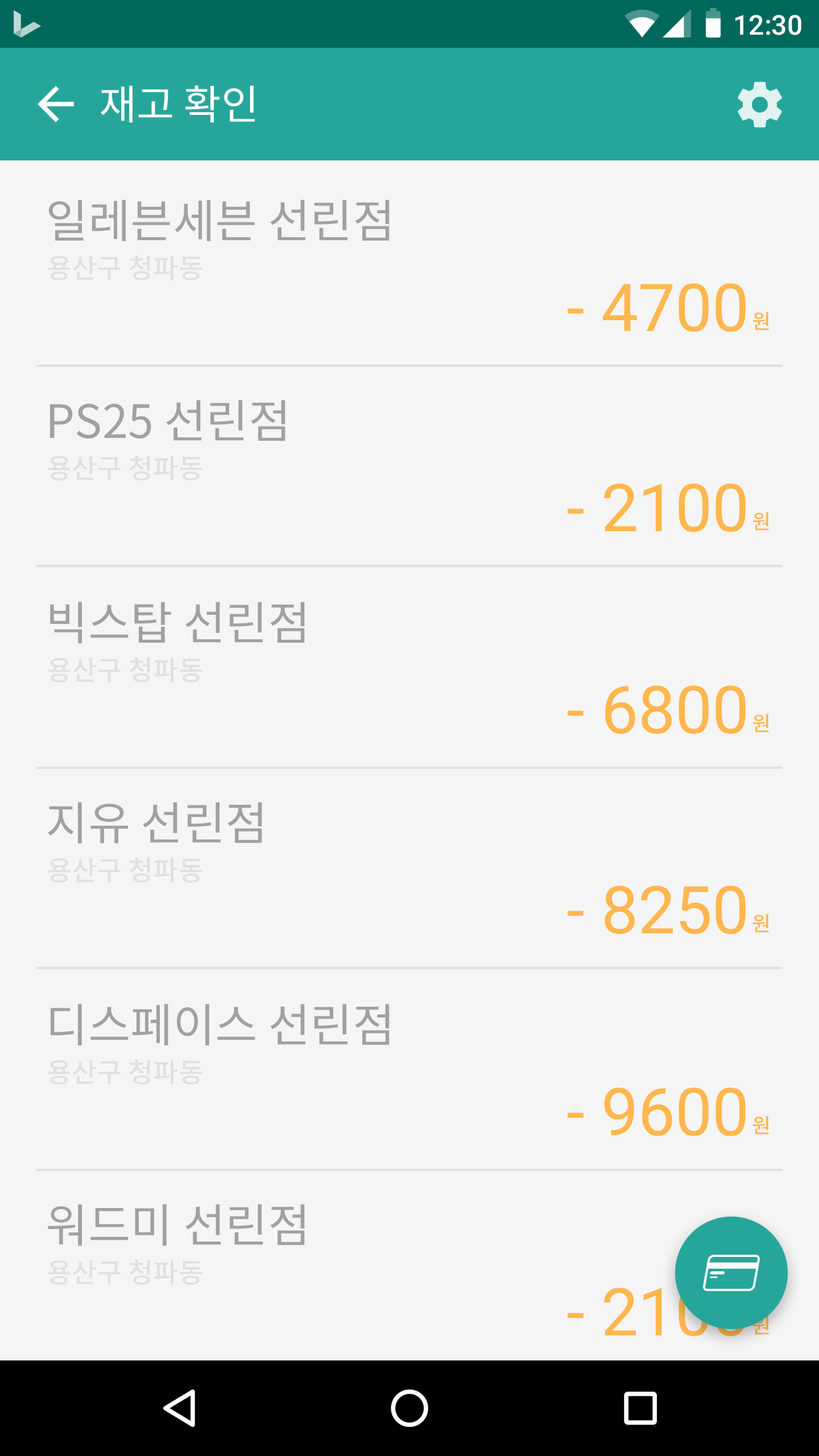
<style>
.page{position:relative;width:819px;height:1456px;background:#f5f5f5}
.page>*{position:absolute;margin:0}
.t1{font:27.3px "Roboto-Medium";color:#ffffff}
.t2{font:40.9px "NotoSansCJKkr-Regular";color:#ffffff}
.t3{font:46.1px "NotoSansCJKkr-Regular";color:#a1a1a1}
.t4{font:27.3px "NotoSansCJKkr-Medium";color:#e0e0e0}
.t5{font:66px "Roboto-Regular";color:#ffb74d}
.t6{font:20.5px "NotoSansCJKkr-Medium";color:#ffb74d}
.t7{font:66px "Roboto-Regular"}
.t8{font:20.5px "NotoSansCJKkr-Medium"}
</style>
<div class="page">
<p class="t1" style="left:735px;top:15px;width:66px;height:20px">12:30</p>
<p class="t2" style="left:101px;top:85px;width:154px;height:38px">재고 확인</p>
<p class="t3" style="left:49px;top:200px;width:341px;height:41px">일레븐세븐 선린점</p>
<p class="t4" style="left:48px;top:255px;width:154px;height:25px">용산구 청파동</p>
<p class="t5" style="left:568px;top:283px;width:178px;height:49px">- 4700</p>
<p class="t6" style="left:752px;top:312px;width:17px;height:18px">원</p>
<p class="t3" style="left:50px;top:400px;width:236px;height:41px">PS25 선린점</p>
<p class="t4" style="left:48px;top:456px;width:154px;height:25px">용산구 청파동</p>
<p class="t5" style="left:568px;top:483px;width:178px;height:49px">- 2100</p>
<p class="t6" style="left:752px;top:512px;width:17px;height:19px">원</p>
<p class="t3" style="left:50px;top:602px;width:255px;height:41px">빅스탑 선린점</p>
<p class="t4" style="left:48px;top:657px;width:154px;height:25px">용산구 청파동</p>
<p class="t5" style="left:568px;top:685px;width:178px;height:49px">- 6800</p>
<p class="t6" style="left:752px;top:714px;width:17px;height:19px">원</p>
<p class="t3" style="left:48px;top:802px;width:214px;height:41px">지유 선린점</p>
<p class="t4" style="left:48px;top:858px;width:154px;height:25px">용산구 청파동</p>
<p class="t5" style="left:568px;top:886px;width:178px;height:48px">- 8250</p>
<p class="t6" style="left:752px;top:914px;width:17px;height:19px">원</p>
<p class="t3" style="left:51px;top:1004px;width:339px;height:42px">디스페이스 선린점</p>
<p class="t4" style="left:48px;top:1060px;width:154px;height:25px">용산구 청파동</p>
<p class="t5" style="left:568px;top:1087px;width:178px;height:49px">- 9600</p>
<p class="t6" style="left:752px;top:1116px;width:17px;height:19px">원</p>
<p class="t3" style="left:48px;top:1204px;width:257px;height:42px">워드미 선린점</p>
<p class="t4" style="left:48px;top:1260px;width:154px;height:25px">용산구 청파동</p>
<p class="t7" style="left:568px;top:1288px;width:178px;height:49px">- 2100</p>
<p class="t8" style="left:752px;top:1316px;width:17px;height:19px">원</p>
</div>
